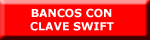
<style>
.page{position:relative;width:150px;height:40px;background:#ff0000}
.page>*{position:absolute;margin:0}
.t1{font:11px "Verdana-Bold";color:#ffffff}
</style>
<div class="page">
<p class="t1" style="left:30px;top:8px;width:84px;height:23px">BANCOS CON<br>CLAVE SWIFT</p>
</div>
